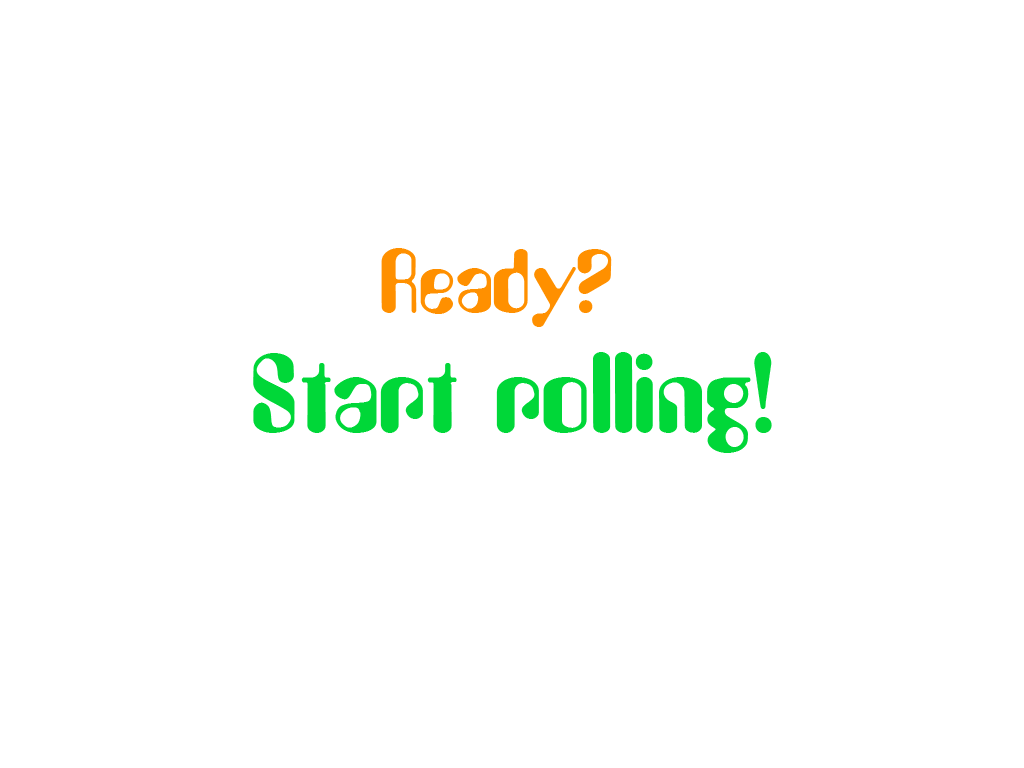
<style>
.page{position:relative;width:1024px;height:768px;background:#ffffff}
.page>*{position:absolute;margin:0}
.t1{font:100px "Asimov";color:#00d738}
.t2{font:80px "Asimov";color:#ff9000}
.t3{font:100px "Asimov";color:#02d739}
</style>
<div class="page">
<p class="t1" style="left:253px;top:248px;width:519px;height:205px;text-align:center"><span class="t2">Ready? <br></span>Start rolling<span class="t3">!</span></p>
</div>
